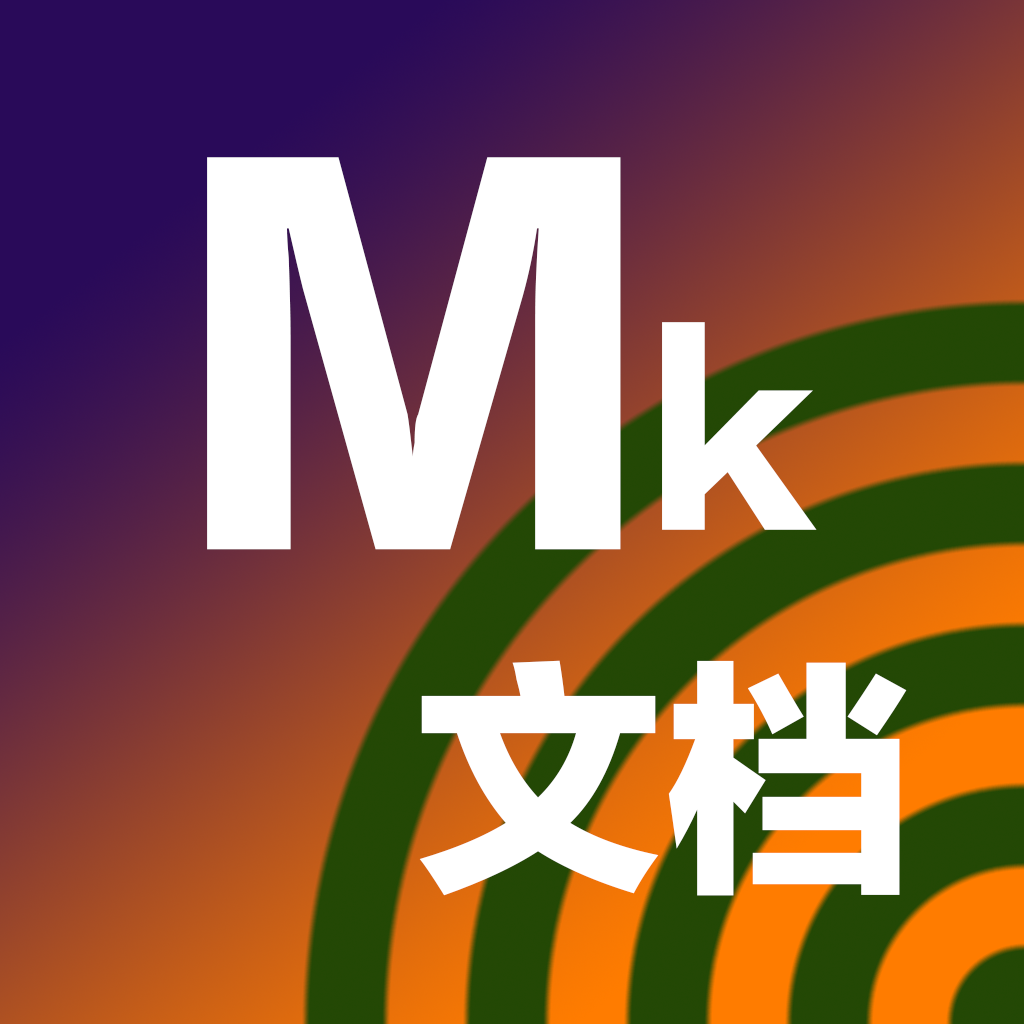
<style>
.page{position:relative;width:1024px;height:1024px}
.page>*{position:absolute;margin:0}
.t1{font:454.2px "FZLTTHK--GBK1-0";color:#ffffff}
.t2{font:227.1px "FZLTTHK--GBK1-0";color:#ffffff}
.t3{font:250px "FZLTTHK--GBK1-0";color:#ffffff}
</style>
<div class="page">
<p class="t1" style="left:207px;top:157px;width:610px;height:393px">M<span class="t2">k</span></p>
<p class="t3" style="left:419px;top:660px;width:488px;height:236px">文档</p>
</div>
